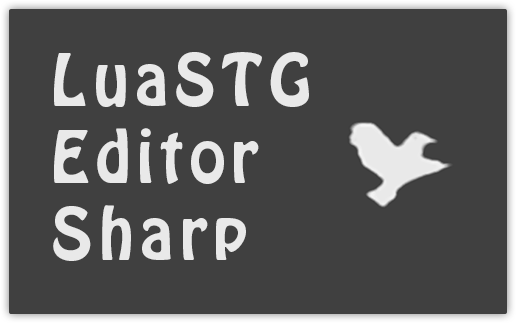
<style>
.page{position:relative;width:516px;height:323px;background:#404040}
.page>*{position:absolute;margin:0}
.t1{font:64px "HoboStd";letter-spacing:0.1em;color:#e9e9e9}
</style>
<div class="page">
<p class="t1" style="left:53px;top:52px;width:256px;height:209px">LuaSTG<br>Editor<br>Sharp</p>
</div>
